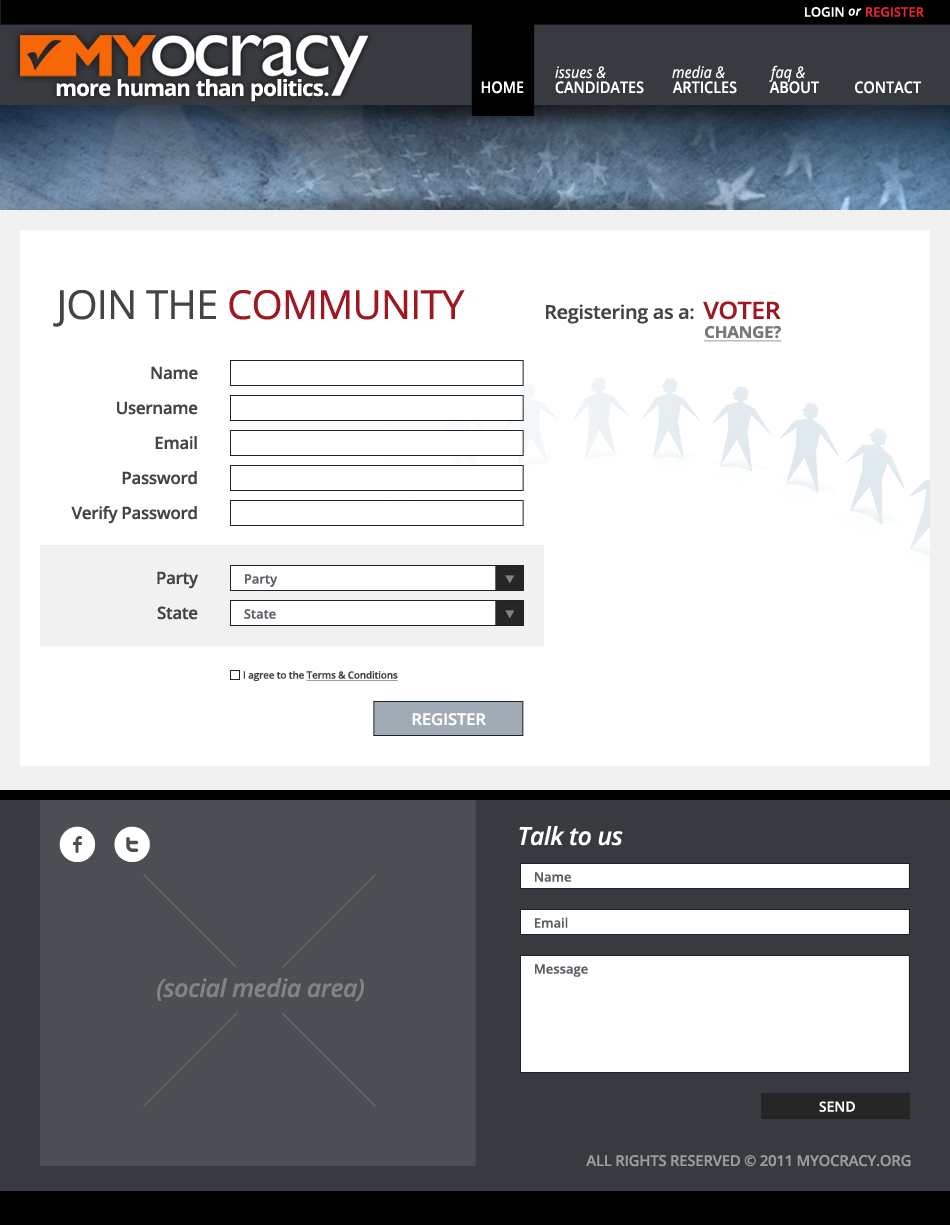
<style>
.page{position:relative;width:950px;height:1225px;background:#ffffff}
.page>*{position:absolute;margin:0}
.t1{font:13px "OpenSans-Semibold";color:#ffffff;text-transform:uppercase}
.t2{font:13px "OpenSans-SemiboldItalic";color:#ffffff}
.t3{font:13px "OpenSans-Semibold";color:#ec2432;text-transform:uppercase}
.t4{font:16px "OpenSans-Italic";color:#ffffff;scale:0.9 1}
.t5{font:22.2px "OpenSans-Bold";letter-spacing:-0.02em;color:#ffffff}
.t6{font:16px "OpenSans-Semibold";color:#ffffff;text-transform:uppercase;scale:0.9 1}
.t7{font:40px "OpenSans";letter-spacing:-0.02em;color:#9e1822;text-transform:uppercase}
.t8{font:40px "OpenSans";letter-spacing:-0.02em;color:#444444;text-transform:uppercase}
.t9{font:19px "OpenSans-Semibold";letter-spacing:-0.02em;color:#444444;scale:1.05 1}
.t10{font:23.8px "OpenSans-Semibold";letter-spacing:-0.02em;color:#9e1822;text-transform:uppercase;scale:1.05 1}
.t11{font:16.1px "OpenSans-Bold";letter-spacing:-0.02em;color:#797979;text-transform:uppercase;text-decoration:underline;scale:1.05 1}
.t12{font:17px "OpenSans-Semibold";letter-spacing:-0.02em;color:#444444}
.t13{font:13px "OpenSans-Semibold";color:#5a5e65}
.t14{font:10px "OpenSans-Semibold";letter-spacing:-0.02em;color:#444444;text-decoration:underline}
.t15{font:10px "OpenSans-Semibold";letter-spacing:-0.02em;color:#444444}
.t16{font:16.1px "OpenSans-Semibold";letter-spacing:-0.02em;color:#ffffff;text-transform:uppercase;scale:1.05 1}
.t17{font:50px "Socialico";letter-spacing:0.3em;color:#ffffff}
.t18{font:25px "OpenSans-SemiboldItalic";letter-spacing:-0.02em;color:#ffffff}
.t19{font:25px "OpenSans-SemiboldItalic";letter-spacing:-0.02em;color:#818386}
.t20{font:14px "OpenSans-Semibold";color:#ffffff}
.t21{font:15px "OpenSans-Semibold";letter-spacing:-0.02em;color:#9c9c9c;text-transform:uppercase}
</style>
<div class="page">
<p class="t1" style="left:805px;top:7px;width:57px;height:10px">Login <span class="t2">or</span></p>
<p class="t3" style="left:866px;top:7px;width:58px;height:10px">Register</p>
<p class="t4" style="left:672px;top:65px;width:53px;height:14px">media &amp;</p>
<p class="t4" style="left:769px;top:65px;width:36px;height:17px">faq &amp;</p>
<p class="t4" style="left:555px;top:66px;width:51px;height:13px">issues &amp;</p>
<p class="t5" style="left:56px;top:79px;width:273px;height:23px">more human than politics.</p>
<p class="t6" style="left:481px;top:81px;width:43px;height:13px">home</p>
<p class="t6" style="left:555px;top:81px;width:89px;height:13px">candidates</p>
<p class="t6" style="left:672px;top:81px;width:65px;height:13px">articles</p>
<p class="t6" style="left:769px;top:81px;width:50px;height:13px">ABOUT</p>
<p class="t6" style="left:855px;top:81px;width:66px;height:13px">contact</p>
<p class="t7" style="left:53px;top:290px;width:412px;height:37px"><span class="t8">Join the </span>Community</p>
<p class="t9" style="left:546px;top:304px;width:148px;height:20px">Registering as a:</p>
<p class="t10" style="left:703px;top:301px;width:78px;height:19px">Voter</p>
<p class="t11" style="left:704px;top:326px;width:78px;height:16px">change?</p>
<p class="t12" style="left:151px;top:366px;width:47px;height:14px">Name</p>
<p class="t12" style="left:117px;top:401px;width:81px;height:14px">Username</p>
<p class="t12" style="left:155px;top:436px;width:42px;height:14px">Email</p>
<p class="t12" style="left:122px;top:471px;width:75px;height:14px">Password</p>
<p class="t12" style="left:71px;top:506px;width:126px;height:18px">Verify Password</p>
<p class="t12" style="left:157px;top:571px;width:41px;height:18px">Party</p>
<p class="t13" style="left:245px;top:574px;width:33px;height:13px">Party</p>
<p class="t12" style="left:157px;top:606px;width:41px;height:14px">State</p>
<p class="t13" style="left:244px;top:609px;width:32px;height:10px">State</p>
<p class="t14" style="left:243px;top:671px;width:155px;height:11px"><span class="t15">I agree to the </span>Terms &amp; Conditions</p>
<p class="t16" style="left:412px;top:713px;width:74px;height:13px">Register</p>
<p class="t17" style="left:59px;top:826px;width:91px;height:36px">ft</p>
<p class="t18" style="left:519px;top:826px;width:104px;height:20px">Talk to us</p>
<p class="t13" style="left:535px;top:872px;width:36px;height:10px">Name</p>
<p class="t13" style="left:535px;top:917px;width:33px;height:11px">Email</p>
<p class="t13" style="left:535px;top:964px;width:53px;height:13px">Message</p>
<p class="t19" style="left:157px;top:978px;width:207px;height:23px">(social media area)</p>
<p class="t20" style="left:819px;top:1101px;width:36px;height:11px">SEND</p>
<p class="t21" style="left:586px;top:1155px;width:325px;height:12px">all rights reserved © 2011 myocracy.org</p>
</div>
